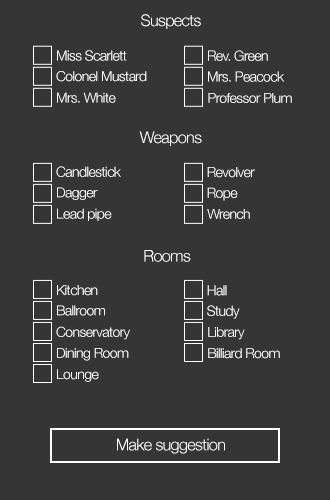
<style>
.page{position:relative;width:330px;height:500px;background:#353535}
.page>*{position:absolute;margin:0}
.t1{font:15.9px "HelveticaNeue-Light";letter-spacing:-0.04em;color:#ffffff}
.t2{font:14px "HelveticaNeue-Light";letter-spacing:-0.04em;color:#ffffff}
.t3{font:14.1px "HelveticaNeue-Light";letter-spacing:-0.04em;color:#ffffff}
.t4{font:13.8px "HelveticaNeue-Light";letter-spacing:-0.04em;color:#ffffff}
.t5{font:13.9px "HelveticaNeue-Light";letter-spacing:-0.04em;color:#ffffff}
.t6{font:13.7px "HelveticaNeue-Light";letter-spacing:-0.04em;color:#ffffff}
</style>
<div class="page">
<p class="t1" style="left:141px;top:14px;width:60px;height:15px">Suspects</p>
<p class="t2" style="left:57px;top:50px;width:70px;height:11px">Miss Scarlett</p>
<p class="t3" style="left:208px;top:50px;width:60px;height:11px">Rev. Green</p>
<p class="t4" style="left:56px;top:71px;width:91px;height:11px">Colonel Mustard</p>
<p class="t2" style="left:208px;top:71px;width:77px;height:11px">Mrs. Peacock</p>
<p class="t4" style="left:57px;top:92px;width:59px;height:11px">Mrs. White</p>
<p class="t4" style="left:208px;top:93px;width:84px;height:10px">Professor Plum</p>
<p class="t1" style="left:139px;top:131px;width:63px;height:15px">Weapons</p>
<p class="t2" style="left:56px;top:166px;width:65px;height:11px">Candlestick</p>
<p class="t3" style="left:207px;top:167px;width:48px;height:11px">Revolver</p>
<p class="t4" style="left:57px;top:187px;width:41px;height:13px">Dagger</p>
<p class="t5" style="left:207px;top:187px;width:31px;height:14px">Rope</p>
<p class="t4" style="left:57px;top:208px;width:55px;height:13px">Lead pipe</p>
<p class="t4" style="left:207px;top:209px;width:43px;height:10px">Wrench</p>
<p class="t1" style="left:144px;top:250px;width:47px;height:12px">Rooms</p>
<p class="t2" style="left:57px;top:285px;width:41px;height:11px">Kitchen</p>
<p class="t3" style="left:207px;top:285px;width:20px;height:11px">Hall</p>
<p class="t4" style="left:57px;top:305px;width:48px;height:11px">Ballroom</p>
<p class="t5" style="left:207px;top:305px;width:33px;height:14px">Study</p>
<p class="t4" style="left:56px;top:326px;width:74px;height:14px">Conservatory</p>
<p class="t4" style="left:208px;top:327px;width:37px;height:13px">Library</p>
<p class="t6" style="left:57px;top:348px;width:72px;height:13px">Dining Room</p>
<p class="t4" style="left:208px;top:348px;width:72px;height:11px">Billiard Room</p>
<p class="t6" style="left:57px;top:369px;width:42px;height:13px">Lounge</p>
<p class="t1" style="left:117px;top:438px;width:108px;height:16px">Make suggestion</p>
</div>
